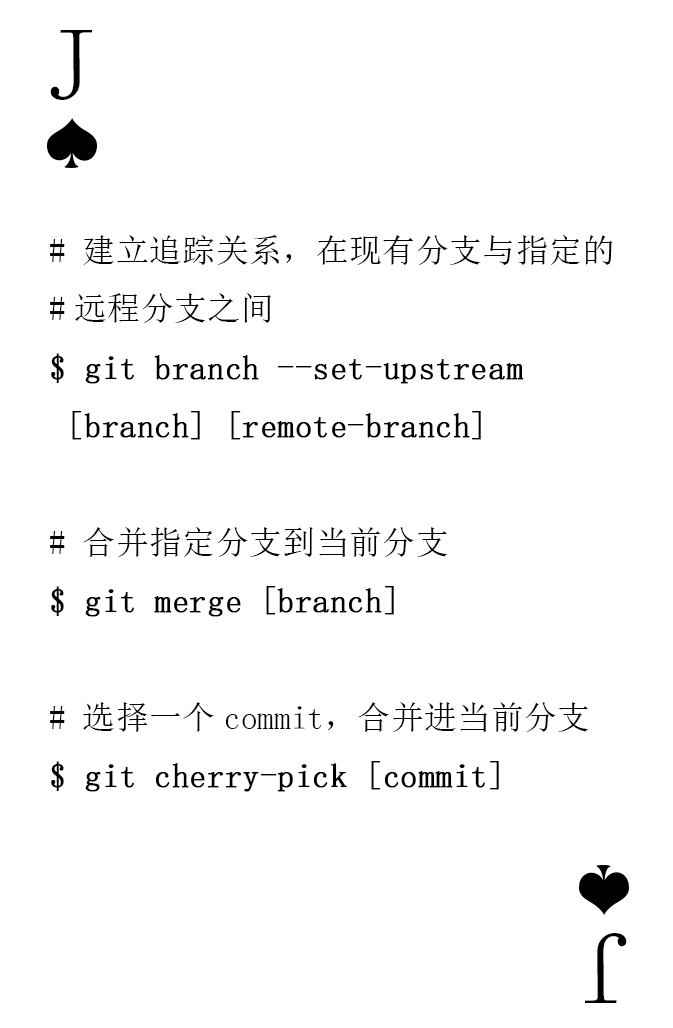
<style>
.page{position:relative;width:673px;height:1028px;background:#ffffff}
.page>*{position:absolute;margin:0}
.t1{font:104.2px "SimSun-ExtB";color:#010101;scale:0.93 1}
.t2{font:33.3px "SimSun";color:#000000;font-weight:bold}
.t3{font:33.3px "SimSun";color:#000000}
.t4{font:104.2px "SimSun-ExtB";letter-spacing:-0.14em;color:#010101;scale:0.93 1}
</style>
<div class="page">
<p class="t1" style="left:50px;top:29px;width:42px;height:71px">J</p>
<p class="t2" style="left:50px;top:235px;width:563px;height:557px"><span class="t3"># 建立追踪关系，在现有分支与指定的<br>#远程分支之间<br></span>$ git branch --set-upstream<br> [branch] [remote-branch]<br><span class="t3"><br># 合并指定分支到当前分支<br></span>$ git merge [branch]<br><span class="t3"><br># 选择一个commit，合并进当前分支<br></span>$ git cherry-pick [commit]</p>
<p class="t4" style="left:585px;top:933px;width:42px;height:71px;rotate:180deg">J</p>
</div>
